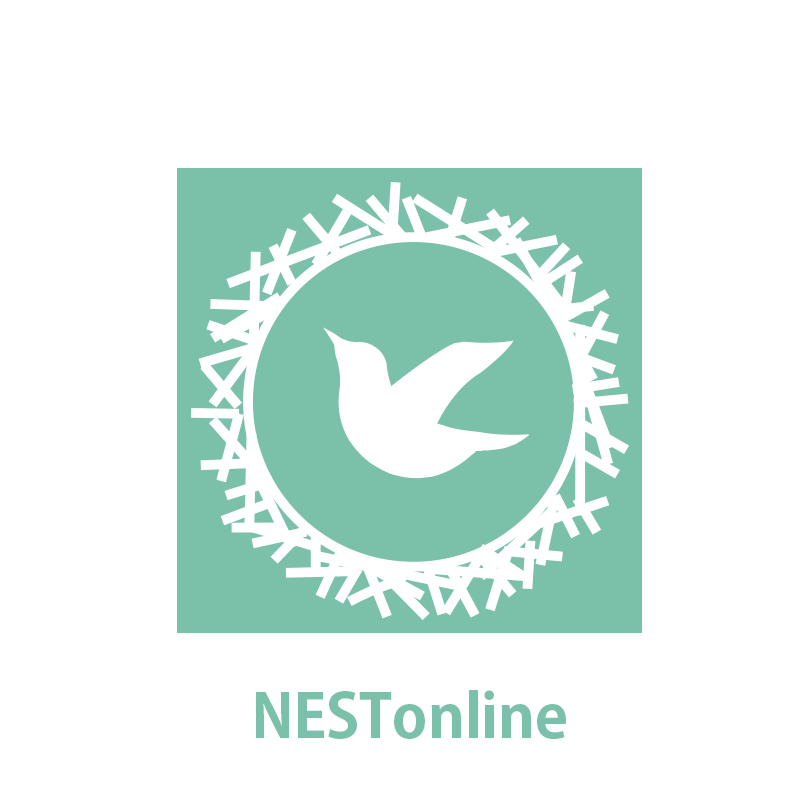
<style>
.page{position:relative;width:800px;height:800px;background:#ffffff}
.page>*{position:absolute;margin:0}
.t1{font:60px "KozGoPr6N-Bold";color:#7bc1a9}
</style>
<div class="page">
<p class="t1" style="left:256px;top:690px;width:310px;height:49px">NESTonline</p>
</div>
